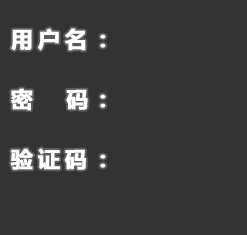
<style>
.page{position:relative;width:247px;height:235px;background:#333333}
.page>*{position:absolute;margin:0}
.t1{font:22px/30px "MicrosoftYaHei-Bold";letter-spacing:0.2em;color:#ffffff;font-weight:bold}
.t2{font:22px/30px "MicrosoftYaHei-Bold";letter-spacing:0.13em;color:#ffffff;font-weight:bold}
</style>
<div class="page">
<p class="t1" style="left:10px;top:28px;width:96px;height:142px;text-align:center">用户名：<br><span class="t2"><br>密   码</span>：<br><br>验证码：</p>
</div>
